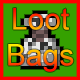
<style>
.page{position:relative;width:80px;height:80px;background:#35a100}
.page>*{position:absolute;margin:0}
.t1{font:30px "ArialMT"}
</style>
<div class="page">
<p class="t1" style="left:8px;top:8px;width:66px;height:64px;text-align:center">Loot<br>Bags</p>
</div>
